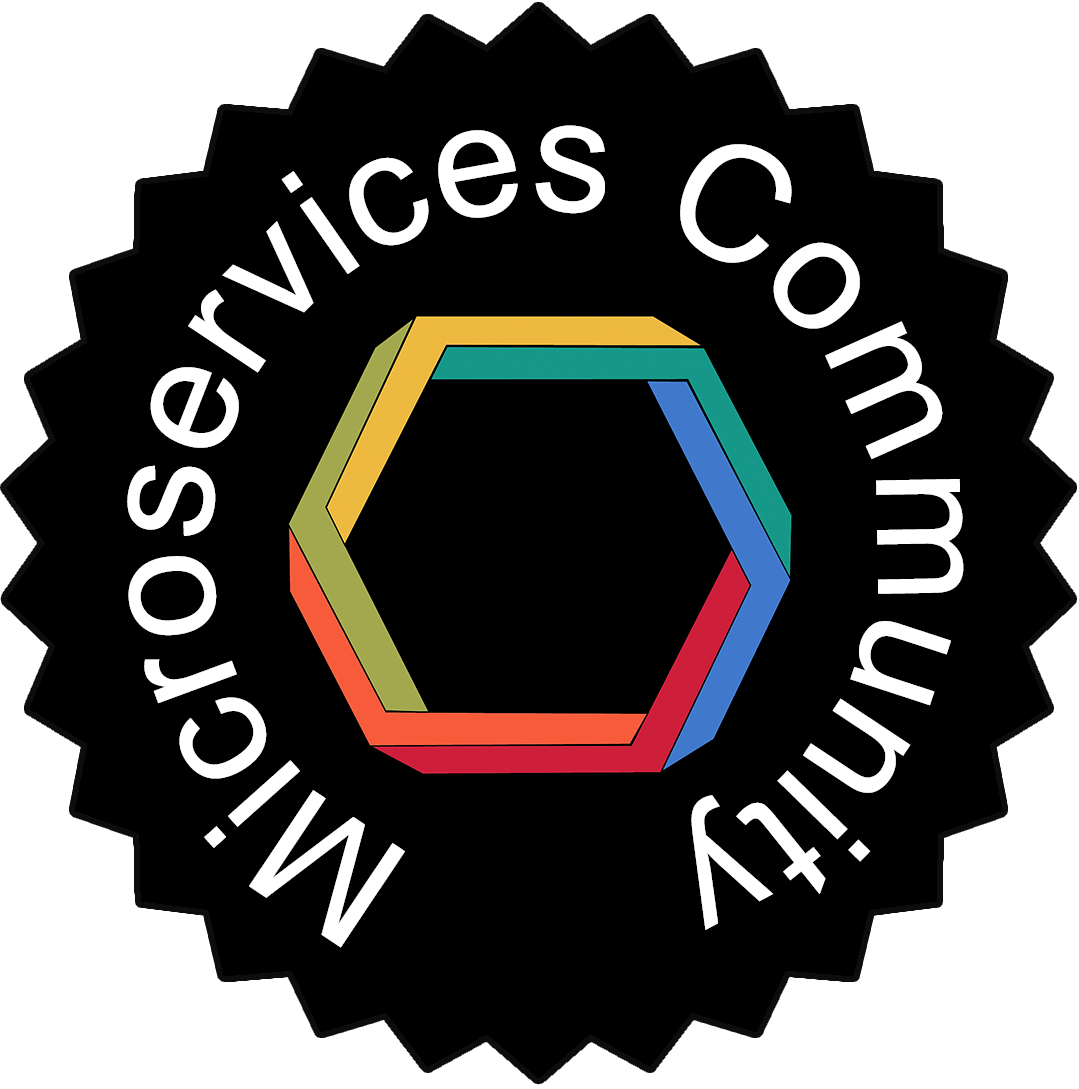
<style>
.page{position:relative;width:1079px;height:1089px;background:#000000}
.page>*{position:absolute;margin:0}
.t1{font:161px "ArialMT";color:#ffffff}
</style>
<div class="page">
<p class="t1" style="left:127px;top:125px;width:837px;height:823px">Microservices Community</p>
</div>
